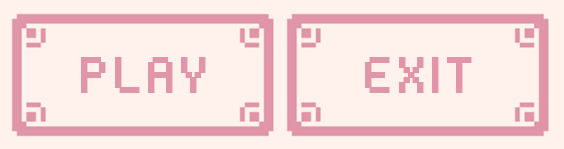
<style>
.page{position:relative;width:564px;height:149px;background:#fff1eb}
.page>*{position:absolute;margin:0}
.t1{font:79.7px "HeartbitXX2Px";color:#e096a8;font-weight:bold;scale:0.9 1}
</style>
<div class="page">
<p class="t1" style="left:81px;top:57px;width:125px;height:36px">PLAY</p>
<p class="t1" style="left:365px;top:57px;width:107px;height:36px">EXIT</p>
</div>
